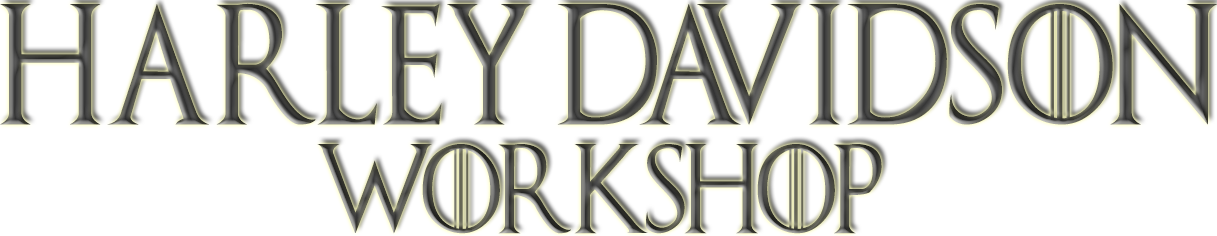
<style>
.page{position:relative;width:1217px;height:236px;background:#ffffff}
.page>*{position:absolute;margin:0}
.t1{font:120.2px "GameofThrones";scale:0.87 1}
.t2{font:89.1px "GameofThrones";scale:0.87 1}
</style>
<div class="page">
<p class="t1" style="left:0px;top:3px;width:1217px;height:122px">harley davidson</p>
<p class="t2" style="left:317px;top:144px;width:565px;height:90px">Workshop</p>
</div>
